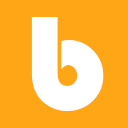
<style>
.page{position:relative;width:128px;height:128px;background:#ffa616}
.page>*{position:absolute;margin:0}
.t1{font:140px "Bauhaus93";color:#ffffff}
</style>
<div class="page">
<p class="t1" style="left:31px;top:17px;width:73px;height:94px">b</p>
</div>
